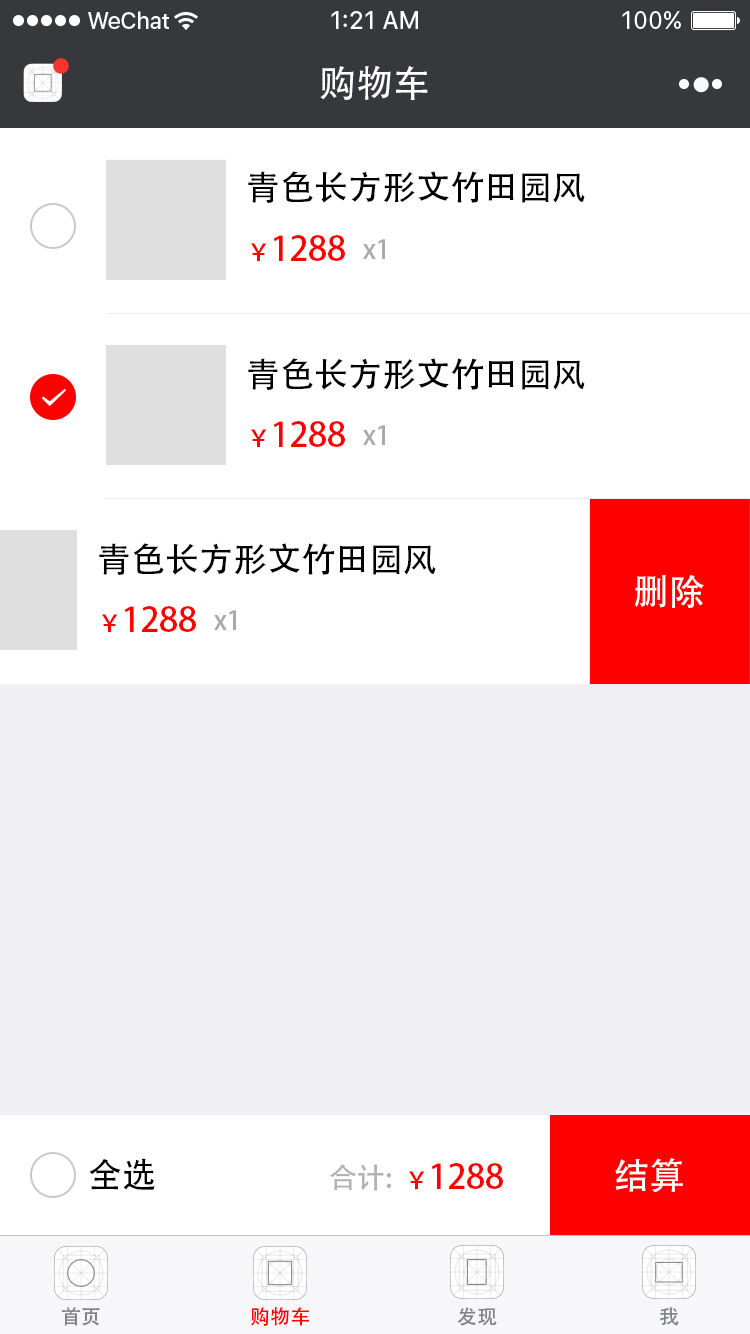
<style>
.page{position:relative;width:750px;height:1334px;background:#ffffff}
.page>*{position:absolute;margin:0}
.t1{font:37px "AdobeHeitiStd-Regular";color:#ffffff}
.t2{font:34.1px "AdobeHeitiStd-Regular";color:#000000}
.t3{font:34px "AdobeHeitiStd-Regular";color:#ff0000}
.t4{font:24px "AdobeHeitiStd-Regular";color:#ff0000}
.t5{font:26px "AdobeHeitiStd-Regular";color:#a9a9a9}
.t6{font:36px "AdobeHeitiStd-Regular";color:#ffffff}
.t7{font:28px "AdobeHeitiStd-Regular";color:#b2b2b2}
.t8{font:20px "AdobeHeitiStd-Regular";color:#7f8389}
.t9{font:20px "AdobeHeitiStd-Regular";color:#ff0000}
</style>
<div class="page">
<p class="t1" style="left:320px;top:65px;width:108px;height:35px">购物车</p>
<p class="t2" style="left:248px;top:171px;width:337px;height:32px">青色长方形文竹田园风</p>
<p class="t3" style="left:251px;top:235px;width:94px;height:27px"><span class="t4">￥</span>1288</p>
<p class="t5" style="left:363px;top:239px;width:22px;height:20px">x1</p>
<p class="t2" style="left:248px;top:358px;width:337px;height:32px">青色长方形文竹田园风</p>
<p class="t3" style="left:251px;top:421px;width:94px;height:27px"><span class="t4">￥</span>1288</p>
<p class="t5" style="left:363px;top:425px;width:22px;height:20px">x1</p>
<p class="t2" style="left:99px;top:543px;width:337px;height:32px">青色长方形文竹田园风</p>
<p class="t6" style="left:635px;top:575px;width:69px;height:33px">删除</p>
<p class="t3" style="left:102px;top:606px;width:94px;height:27px"><span class="t4">￥</span>1288</p>
<p class="t5" style="left:214px;top:610px;width:22px;height:20px">x1</p>
<p class="t2" style="left:89px;top:1158px;width:66px;height:32px">全选</p>
<p class="t6" style="left:615px;top:1158px;width:68px;height:35px">结算</p>
<p class="t7" style="left:330px;top:1164px;width:61px;height:27px">合计:</p>
<p class="t3" style="left:409px;top:1163px;width:94px;height:27px"><span class="t4">￥</span>1288</p>
<p class="t8" style="left:62px;top:1307px;width:38px;height:19px">首页</p>
<p class="t9" style="left:251px;top:1307px;width:58px;height:19px">购物车</p>
<p class="t8" style="left:457px;top:1307px;width:40px;height:19px">发现</p>
<p class="t8" style="left:660px;top:1307px;width:19px;height:19px">我</p>
</div>
